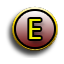
<style>
.page{position:relative;width:64px;height:64px;background:#ffffff}
.page>*{position:absolute;margin:0}
.t1{font:30px "Seravek";color:#ebee05}
</style>
<div class="page">
<p class="t1" style="left:29px;top:19px;width:12px;height:20px">E</p>
</div>
